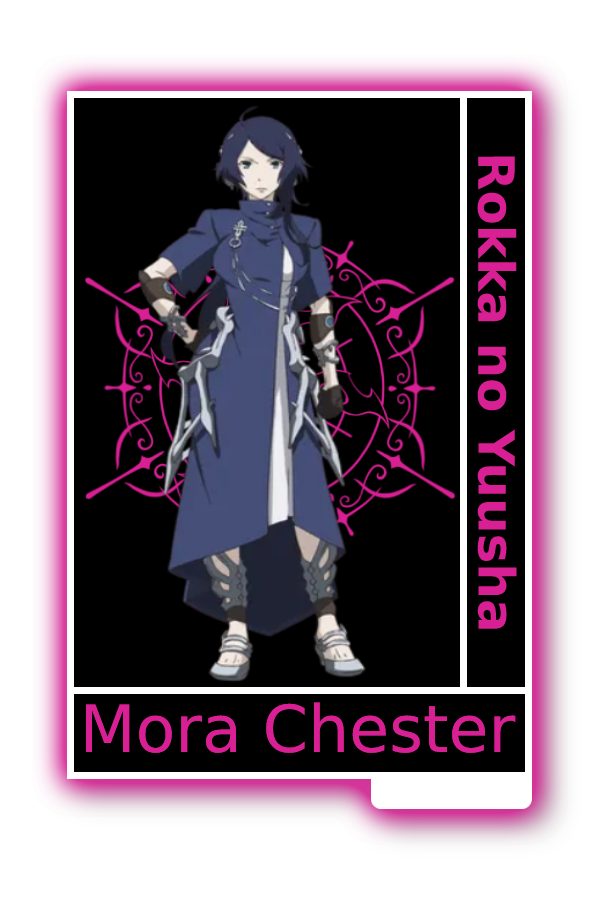
<style>
.page{position:relative;width:600px;height:900px;background:#000000}
.page>*{position:absolute;margin:0}
.t1{font:50px "MADETOMMY-Bold";color:#d81f94}
.t2{font:65px "CoolveticaRg-Regular";color:#d81f94}
</style>
<div class="page">
<p class="t1" style="left:477px;top:156px;width:40px;height:473px;rotate:90deg">Rokka no Yuusha</p>
<p class="t2" style="left:85px;top:702px;width:431px;height:51px">Mora Chester</p>
<p class="t2" style="left:85px;top:702px;width:431px;height:51px">Mora Chester</p>
</div>
